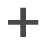
<style>
.page{position:relative;width:44px;height:44px;background:#ffffff}
.page>*{position:absolute;margin:0}
.t1{font:62px "SegoeUI";color:#484848;font-weight:bold}
</style>
<div class="page">
<p class="t1" style="left:8px;top:7px;width:31px;height:30px">+</p>
</div>
